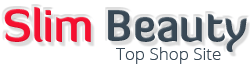
<style>
.page{position:relative;width:250px;height:69px;background:#ffffff}
.page>*{position:absolute;margin:0}
.t1{font:44px "DiavloBold-Regular";color:#394956}
.t2{font:44px "DiavloBold-Regular";color:#f60f2f}
.t3{font:17px "OpenSans-Light";color:#394956}
</style>
<div class="page">
<p class="t1" style="left:4px;top:7px;width:243px;height:45px"><span class="t2">Slim </span>Beauty</p>
<p class="t3" style="left:116px;top:47px;width:105px;height:17px">Top Shop Site</p>
</div>
